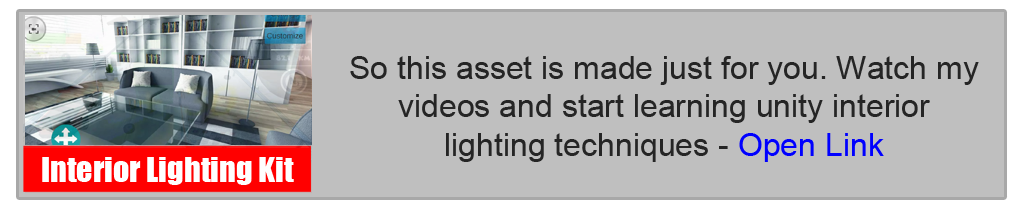
<style>
.page{position:relative;width:1024px;height:210px;background:#bfbfbf}
.page>*{position:absolute;margin:0}
.t1{font:32px "ArialMT";color:#252525}
.t2{font:32px "ArialMT";color:#0000ff}
.t3{font:32px "Impact";color:#ffffff}
</style>
<div class="page">
<p class="t1" style="left:350px;top:56px;width:629px;height:106px;text-align:center">So this asset is made just for you. Watch my<br> videos and start learning unity interior <br>lighting techniques - <span class="t2">Open Link</span></p>
<p class="t3" style="left:42px;top:157px;width:252px;height:28px">Interior Lighting Kit</p>
</div>
